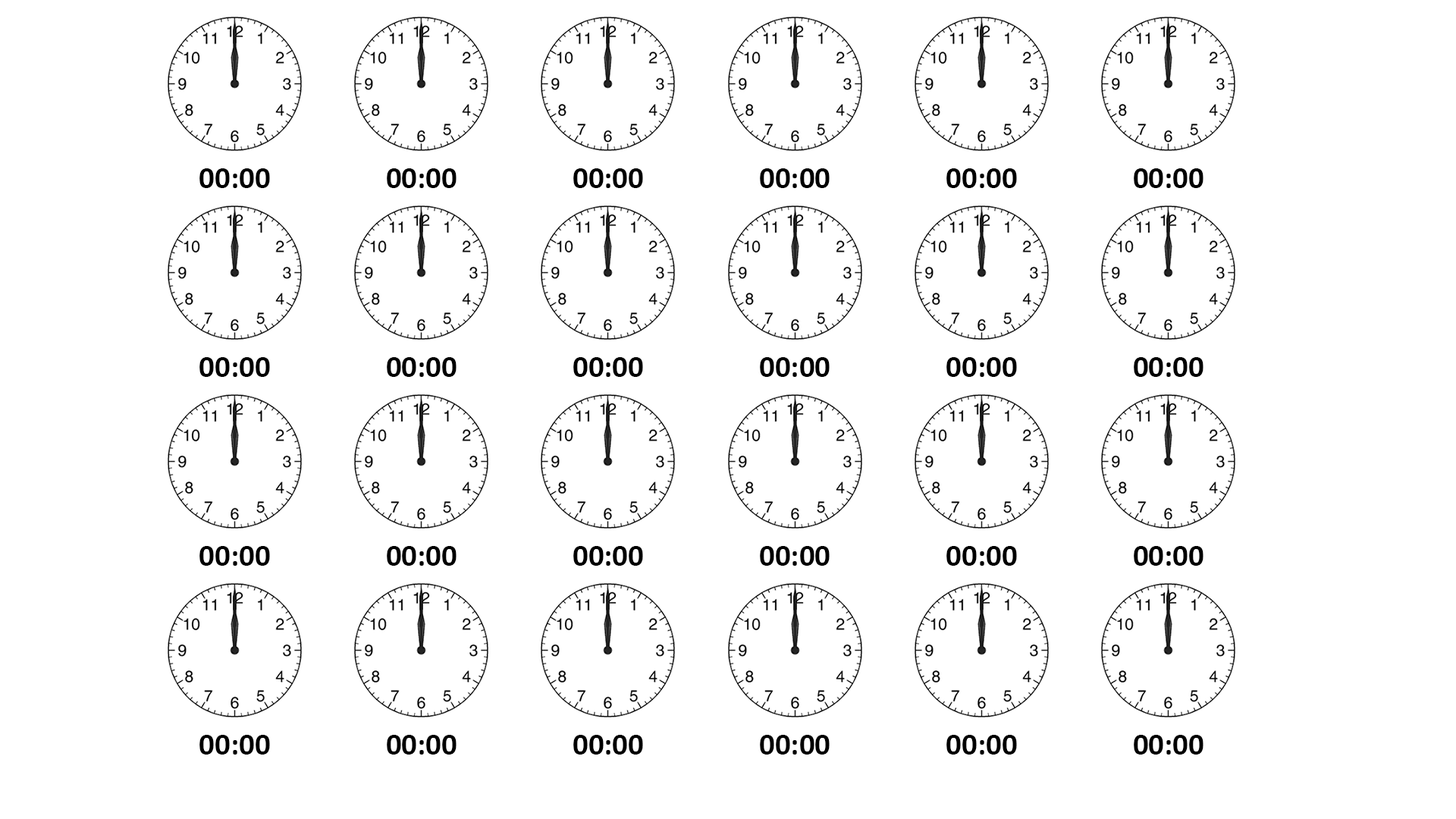
<style>
.page{position:relative;width:1456px;height:819px;background:#ffffff}
.page>*{position:absolute;margin:0}
.t1{font:30.9px "Calibri-Bold";color:#000000}
</style>
<div class="page">
<p class="t1" style="left:199px;top:168px;width:71px;height:20px">00:00</p>
<p class="t1" style="left:387px;top:168px;width:70px;height:20px">00:00</p>
<p class="t1" style="left:573px;top:168px;width:70px;height:20px">00:00</p>
<p class="t1" style="left:760px;top:168px;width:70px;height:20px">00:00</p>
<p class="t1" style="left:946px;top:168px;width:71px;height:20px">00:00</p>
<p class="t1" style="left:1134px;top:168px;width:69px;height:20px">00:00</p>
<p class="t1" style="left:199px;top:357px;width:71px;height:20px">00:00</p>
<p class="t1" style="left:387px;top:357px;width:70px;height:20px">00:00</p>
<p class="t1" style="left:573px;top:357px;width:70px;height:20px">00:00</p>
<p class="t1" style="left:760px;top:357px;width:70px;height:20px">00:00</p>
<p class="t1" style="left:946px;top:357px;width:71px;height:20px">00:00</p>
<p class="t1" style="left:1134px;top:357px;width:69px;height:20px">00:00</p>
<p class="t1" style="left:199px;top:546px;width:71px;height:20px">00:00</p>
<p class="t1" style="left:387px;top:546px;width:70px;height:20px">00:00</p>
<p class="t1" style="left:573px;top:546px;width:70px;height:20px">00:00</p>
<p class="t1" style="left:760px;top:546px;width:70px;height:20px">00:00</p>
<p class="t1" style="left:946px;top:546px;width:71px;height:20px">00:00</p>
<p class="t1" style="left:1134px;top:546px;width:69px;height:20px">00:00</p>
<p class="t1" style="left:199px;top:735px;width:71px;height:20px">00:00</p>
<p class="t1" style="left:387px;top:735px;width:70px;height:20px">00:00</p>
<p class="t1" style="left:573px;top:735px;width:70px;height:20px">00:00</p>
<p class="t1" style="left:760px;top:735px;width:70px;height:20px">00:00</p>
<p class="t1" style="left:946px;top:735px;width:71px;height:20px">00:00</p>
<p class="t1" style="left:1134px;top:735px;width:69px;height:20px">00:00</p>
</div>
